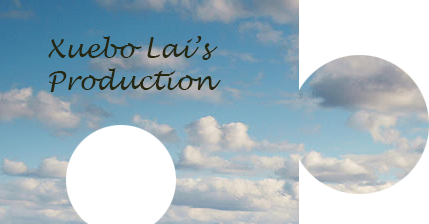
<style>
.page{position:relative;width:429px;height:224px;background:#ffffff}
.page>*{position:absolute;margin:0}
.t1{font:26.2px "LucidaHandwriting-Italic";color:#252711}
</style>
<div class="page">
<p class="t1" style="left:48px;top:36px;width:173px;height:56px">Xuebo Lai’s<br>Production</p>
</div>
